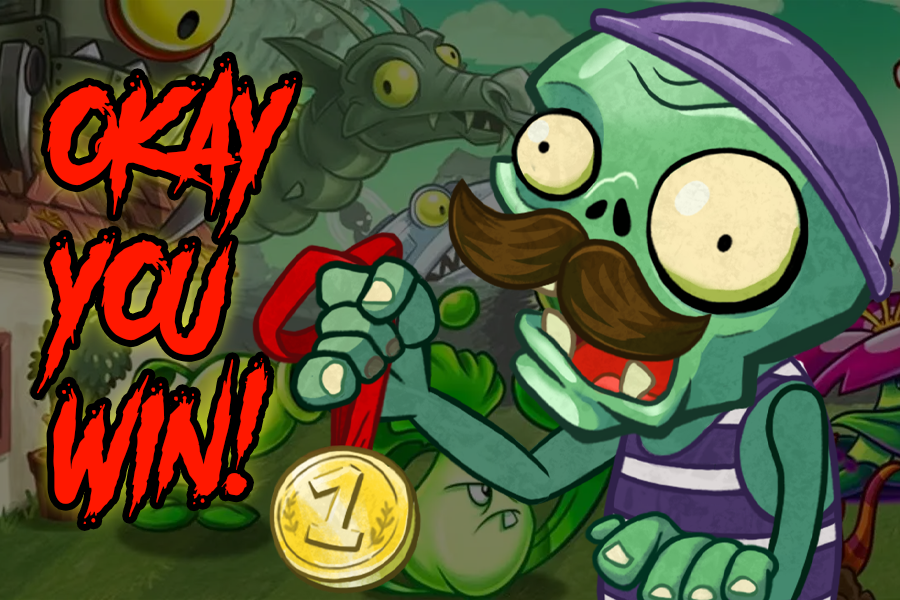
<style>
.page{position:relative;width:900px;height:600px}
.page>*{position:absolute;margin:0}
.t1{font:115.5px/155.2px "AnotherDangerDemo";letter-spacing:0.01em;color:#ff1800;text-transform:uppercase}
</style>
<div class="page">
<p class="t1" style="left:37px;top:58px;width:259px;height:466px">OKAY, <br>YOU<br>win!</p>
</div>
